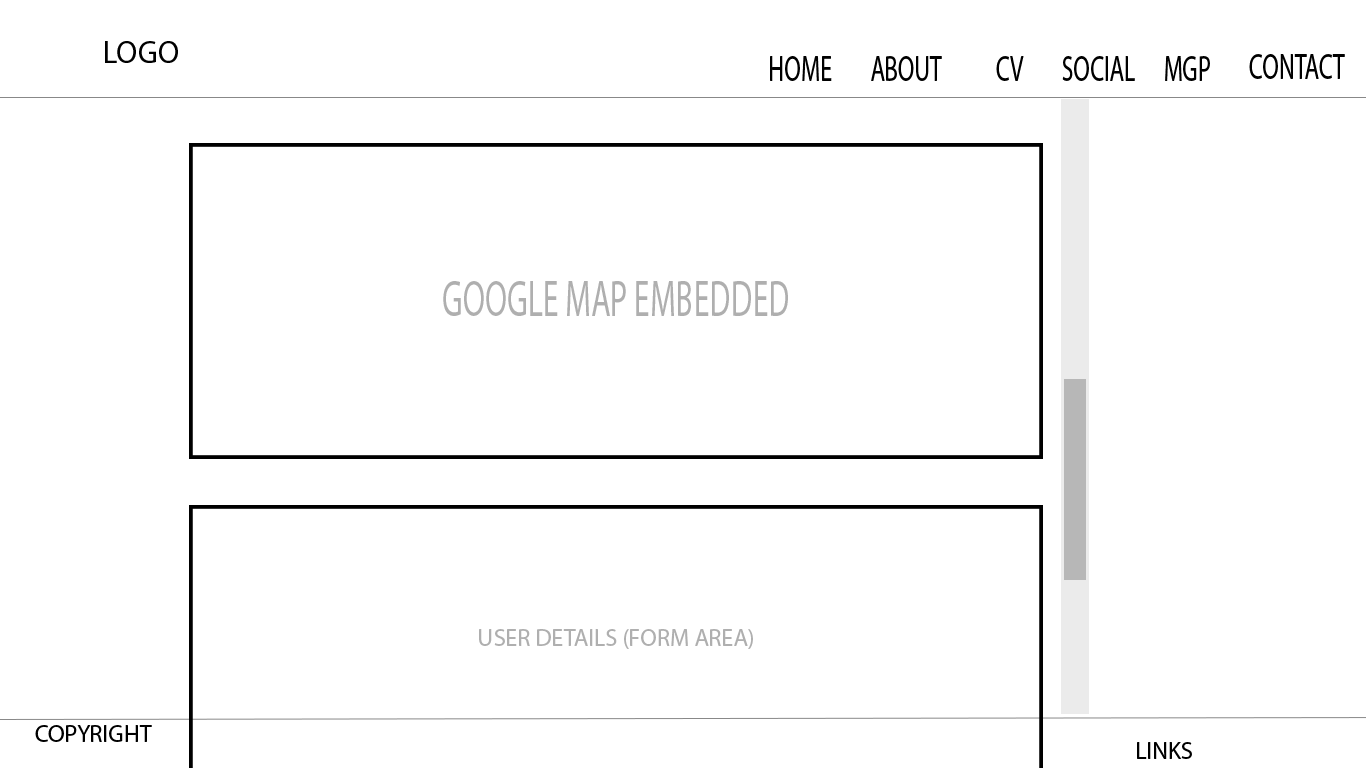
<style>
.page{position:relative;width:1366px;height:768px;background:#ffffff}
.page>*{position:absolute;margin:0}
.t1{font:31.8px "MyriadPro-Regular";color:#000000}
.t2{font:36.3px "MyriadPro-Regular";color:#000000;scale:0.66 1}
.t3{font:50.7px "MyriadPro-Regular";color:#afafaf;scale:0.63 1}
.t4{font:24px "MyriadPro-Regular";color:#afafaf}
.t5{font:24px "MyriadPro-Regular";color:#000000}
</style>
<div class="page">
<p class="t1" style="left:105px;top:41px;width:73px;height:22px">LOGO</p>
<p class="t2" style="left:1249px;top:54px;width:96px;height:25px">CONTACT</p>
<p class="t2" style="left:770px;top:56px;width:62px;height:25px">HOME</p>
<p class="t2" style="left:871px;top:56px;width:71px;height:25px">ABOUT</p>
<p class="t2" style="left:996px;top:56px;width:28px;height:25px">CV</p>
<p class="t2" style="left:1062px;top:56px;width:73px;height:25px">SOCIAL</p>
<p class="t2" style="left:1165px;top:56px;width:45px;height:25px">MGP</p>
<p class="t3" style="left:443px;top:281px;width:345px;height:35px">GOOGLE MAP EMBEDDED</p>
<p class="t4" style="left:479px;top:629px;width:274px;height:20px">USER DETAILS (FORM AREA)</p>
<p class="t5" style="left:35px;top:725px;width:117px;height:17px">COPYRIGHT</p>
<p class="t5" style="left:1137px;top:742px;width:55px;height:17px">LINKS</p>
</div>
